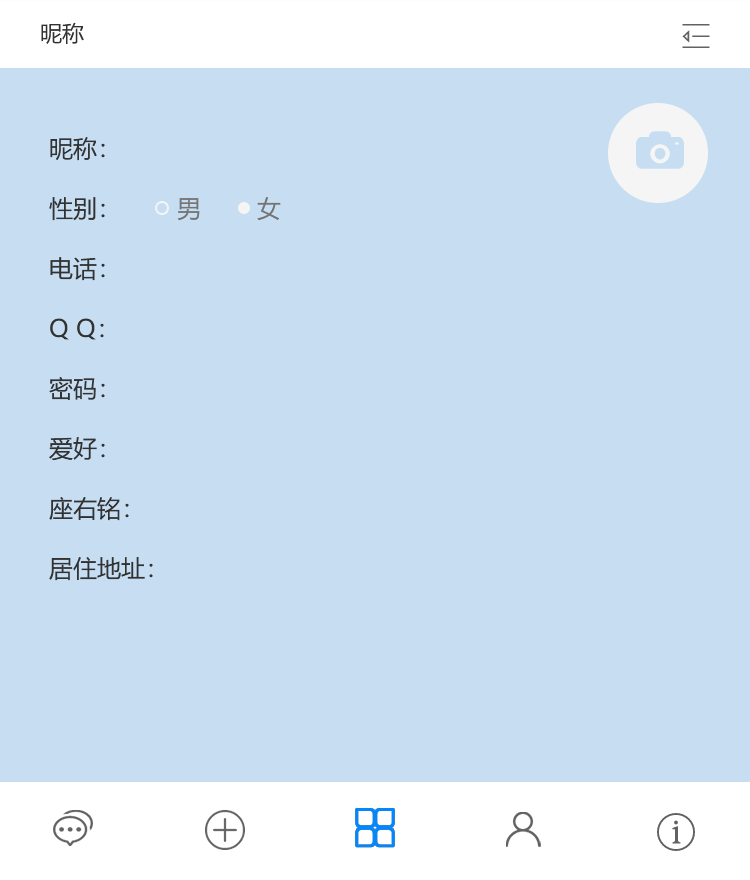
<style>
.page{position:relative;width:750px;height:880px;background:#c7def2}
.page>*{position:absolute;margin:0}
.t1{font:22px "MicrosoftYaHei";color:#323232;text-transform:uppercase}
.t2{font:24px/60px "MicrosoftYaHei";color:#323232;text-transform:uppercase}
.t3{font:24px/60px "MicrosoftYaHei";color:#757575;text-transform:uppercase}
</style>
<div class="page">
<p class="t1" style="left:41px;top:22px;width:43px;height:22px">昵称</p>
<p class="t2" style="left:49px;top:137px;width:232px;height:444px">昵称：<br>性别：       <span class="t3"> 男        女<br></span>电话：<br>Q Q：<br>密码：<br>爱好：<br>座右铭：<br>居住地址：</p>
</div>
